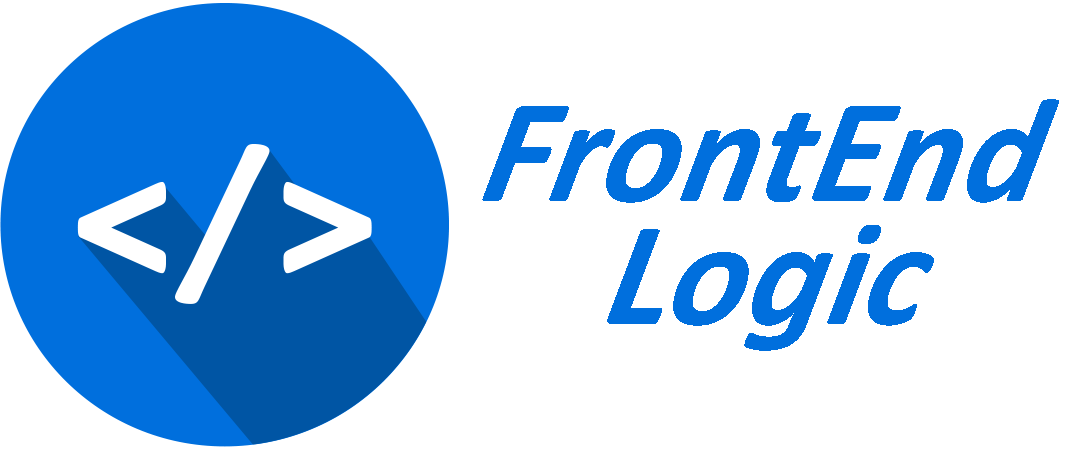
<style>
.page{position:relative;width:1070px;height:450px;background:#ffffff}
.page>*{position:absolute;margin:0}
.t1{font:150px "Calibri-BoldItalic";color:#006fdd;font-style:italic}
</style>
<div class="page">
<p class="t1" style="left:482px;top:99px;width:577px;height:104px">FrontEnd</p>
<p class="t1" style="left:607px;top:225px;width:327px;height:126px">Logic</p>
</div>
